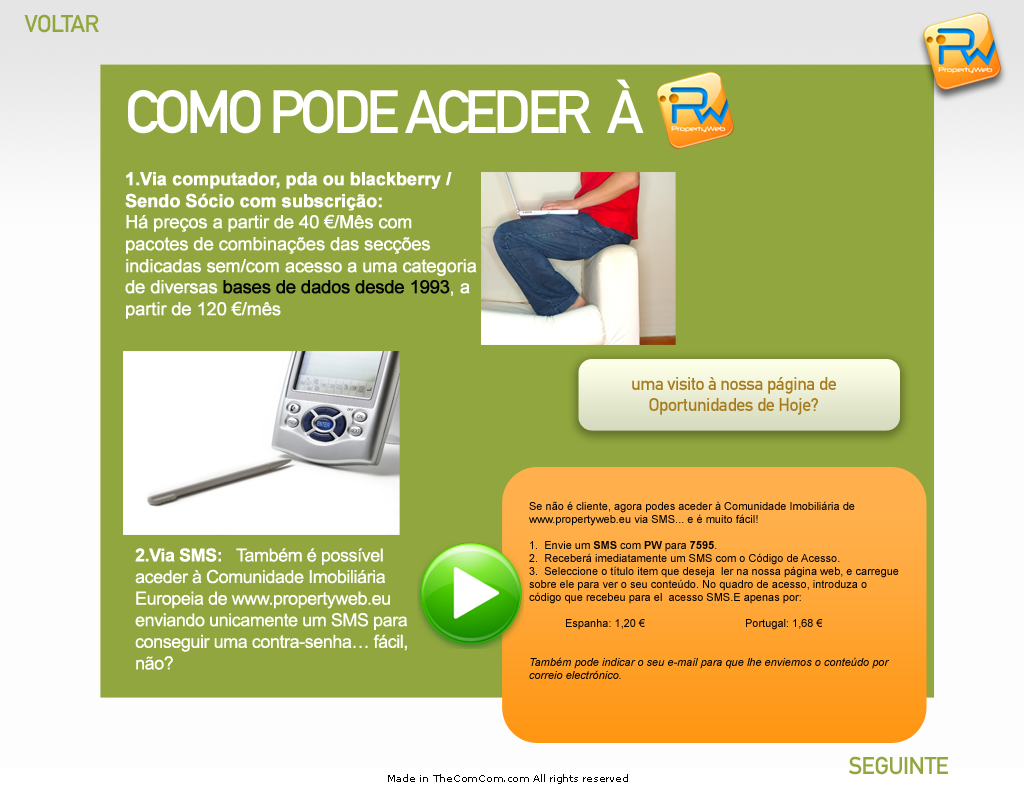
<style>
.page{position:relative;width:1024px;height:800px;background:#91a63e}
.page>*{position:absolute;margin:0}
.t1{font:24px "DINMittelschriftStd";letter-spacing:-0.025em;color:#91a63e}
.t2{font:60px "DINMittelschriftStd";letter-spacing:-0.075em;color:#ffffff;text-transform:uppercase}
.t3{font:18px "ArialMT";letter-spacing:-0.025em;color:#ffffff;font-weight:bold}
.t4{font:18px "Arial-BoldMT";letter-spacing:-0.025em;color:#ffffff;font-weight:bold}
.t5{font:18px "ArialMT";letter-spacing:-0.025em;color:#030303;font-weight:bold}
.t6{font:18px "DINMittelschriftStd";letter-spacing:-0.025em;color:#a77c1e}
.t7{font:11px/13px "ArialMT";color:#000000}
.t8{font:11px/13px "Arial-BoldMT";color:#000000}
.t9{font:11px/13px "Arial-ItalicMT";color:#000000}
.t10{font:18px "ArialMT";letter-spacing:-0.025em;color:#ffffff}
.t11{font:18px "Arial-BoldMT";letter-spacing:-0.025em;color:#ffffff}
.t12{font:10px "MSReferenceSansSerif";letter-spacing:-0.025em;color:#010101}
</style>
<div class="page">
<p class="t1" style="left:24px;top:14px;width:75px;height:19px">VOLTAR</p>
<p class="t2" style="left:128px;top:79px;width:516px;height:55px">COMO PODE ACEDER  À</p>
<p class="t3" style="left:125px;top:172px;width:352px;height:147px"><span class="t4">1.Via computador, pda ou blackberry / Sendo Sócio com subscrição: </span>               Há preços a partir de 40 €/Mês com pacotes de combinações das secções indicadas sem/com acesso a uma categoria de diversas <span class="t5">bases de dados desde 1993</span>, a partir de 120 €/mês</p>
<p class="t6" style="left:632px;top:376px;width:204px;height:39px;text-align:center">uma visito à nossa página de Oportunidades de Hoje?</p>
<p class="t7" style="left:529px;top:501px;width:370px;height:178px">Se não é cliente, agora podes aceder à Comunidade Imobiliária de www.propertyweb.eu via SMS... e é muito fácil!   <br><br>1.  Envie um <span class="t8">SMS</span> com <span class="t8">PW</span> para <span class="t8">7595</span>.   <br>2.  Receberá imediatamente um SMS com o Código de Acesso.   <br>3.  Seleccione o título item que deseja  ler na nossa página web, e carregue  sobre ele para ver o seu conteúdo. No quadro de acesso, introduza o código que recebeu para el  acesso SMS.E apenas por:       <br><br> Espanha: 1,20 €          Portugal: 1,68 €    <br><br><br><span class="t9">Também pode indicar o seu e-mail para que lhe enviemos o conteúdo por correio electrónico.</span></p>
<p class="t10" style="left:135px;top:548px;width:272px;height:122px"><span class="t11">2.Via SMS:   </span>Também é possível aceder à Comunidade Imobiliária Europeia de www.propertyweb.eu  enviando unicamente um SMS para conseguir uma contra-senha… fácil, não?</p>
<p class="t1" style="left:848px;top:756px;width:100px;height:19px">SEGUINTE</p>
<p class="t12" style="left:388px;top:774px;width:240px;height:10px">Made in TheComCom.com All rights reserved</p>
</div>
